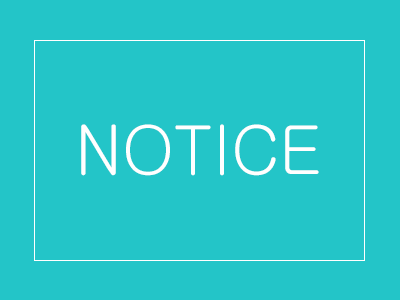
<style>
.page{position:relative;width:400px;height:300px;background:#23c5c8}
.page>*{position:absolute;margin:0}
.t1{font:67.4px "Gulim";color:#ffffff}
</style>
<div class="page">
<p class="t1" style="left:81px;top:124px;width:238px;height:52px">NOTICE</p>
</div>
